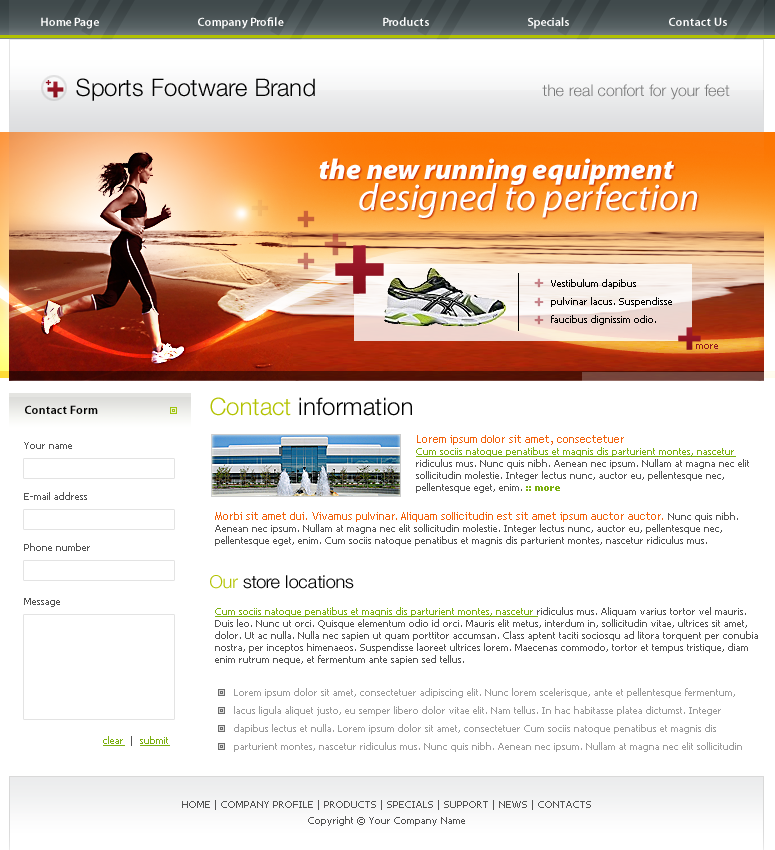
<style>
.page{position:relative;width:775px;height:850px;background:#ffffff}
.page>*{position:absolute;margin:0}
.t1{font:12px "MyriadPro-Semibold";color:#ffffff}
.t2{font:24px "HelveticaNeueLTPro-Lt";color:#000000}
.t3{font:16px "HelveticaNeueLTPro-Lt";color:#777778}
.t4{font:29px "MyriadPro-BlackIt";color:#ffffff}
.t5{font:38px "MyriadPro-It";color:#ffffff}
.t6{font:10px/18px "Tahoma";color:#000000}
.t7{font:10px "Tahoma";color:#911422}
.t8{font:24px "HelveticaNeueLTPro-Lt";color:#b2c200}
.t9{font:12px "MyriadPro-Semibold";color:#000000}
.t10{font:10px/12px "Tahoma";color:#535353}
.t11{font:11px/12px "TrebuchetMS";color:#f1610b}
.t12{font:10px/12px "Tahoma";color:#7baf10;text-decoration:underline}
.t13{font:10px/12px "Tahoma-Bold";color:#7baf10}
.t14{font:10px "Tahoma";color:#535353}
.t15{font:18px "HelveticaNeueLTPro-Lt";color:#000000}
.t16{font:18px "HelveticaNeueLTPro-Lt";color:#b2c200}
.t17{font:10px/18px "Tahoma";color:#9b9b9b}
.t18{font:10px "Tahoma";color:#7baf10;text-decoration:underline}
.t19{font:10px/16px "Tahoma";color:#535353}
</style>
<div class="page">
<p class="t1" style="left:41px;top:17px;width:58px;height:12px">Home Page</p>
<p class="t1" style="left:198px;top:17px;width:86px;height:12px">Company Profile</p>
<p class="t1" style="left:383px;top:17px;width:46px;height:9px">Products</p>
<p class="t1" style="left:528px;top:17px;width:41px;height:12px">Specials</p>
<p class="t1" style="left:669px;top:17px;width:58px;height:9px">Contact Us</p>
<p class="t2" style="left:76px;top:78px;width:239px;height:23px">Sports Footware Brand</p>
<p class="t3" style="left:542px;top:84px;width:188px;height:16px">the real confort for your feet</p>
<p class="t4" style="left:319px;top:158px;width:355px;height:27px">the new running equipment</p>
<p class="t5" style="left:359px;top:182px;width:339px;height:36px">designed to perfection</p>
<p class="t6" style="left:551px;top:279px;width:121px;height:46px">Vestibulum dapibus pulvinar lacus. Suspendisse faucibus dignissim odio.</p>
<p class="t7" style="left:696px;top:344px;width:22px;height:5px">more</p>
<p class="t2" style="left:210px;top:397px;width:202px;height:19px"><span class="t8">Contact </span>information</p>
<p class="t9" style="left:25px;top:405px;width:73px;height:9px">Contact Form</p>
<p class="t10" style="left:416px;top:435px;width:333px;height:58px"><span class="t11">Lorem ipsum dolor sit amet, consectetuer <br></span><span class="t12">Cum sociis natoque penatibus et magnis dis parturient montes, nascetur </span>ridiculus mus. Nunc quis nibh. Aenean nec ipsum. Nullam at magna nec elit sollicitudin molestie. Integer lectus nunc, auctor eu, pellentesque nec, pellentesque eget, enim. <span class="t13">:: more</span></p>
<p class="t14" style="left:24px;top:442px;width:48px;height:7px">Your name</p>
<p class="t14" style="left:24px;top:492px;width:63px;height:8px">E-mail address</p>
<p class="t10" style="left:215px;top:512px;width:523px;height:34px"><span class="t11">Morbi sit amet dui. Vivamus pulvinar. Aliquam sollicitudin est sit amet ipsum auctor auctor. </span>Nunc quis nibh. Aenean nec ipsum. Nullam at magna nec elit sollicitudin molestie. Integer lectus nunc, auctor eu, pellentesque nec, pellentesque eget, enim. Cum sociis natoque penatibus et magnis dis parturient montes, nascetur ridiculus mus.</p>
<p class="t14" style="left:24px;top:543px;width:66px;height:8px">Phone number</p>
<p class="t15" style="left:210px;top:575px;width:144px;height:14px"><span class="t16">Our </span>store locations</p>
<p class="t14" style="left:24px;top:598px;width:36px;height:9px">Message</p>
<p class="t10" style="left:215px;top:607px;width:543px;height:58px"><span class="t12">Cum sociis natoque penatibus et magnis dis parturient montes, nascetur </span>ridiculus mus. Aliquam varius tortor vel mauris. Duis leo. Nunc ut orci. Quisque elementum odio id orci. Mauris elit metus, interdum in, sollicitudin vitae, ultrices sit amet, dolor. Ut ac nulla. Nulla nec sapien ut quam porttitor accumsan. Class aptent taciti sociosqu ad litora torquent per conubia nostra, per inceptos himenaeos. Suspendisse laoreet ultrices lorem. Maecenas commodo, tortor et tempus tristique, diam enim rutrum neque, et fermentum ante sapien sed tellus.</p>
<p class="t17" style="left:234px;top:688px;width:508px;height:64px">Lorem ipsum dolor sit amet, consectetuer adipiscing elit. Nunc lorem scelerisque, ante et pellentesque fermentum, lacus ligula aliquet justo, eu semper libero dolor vitae elit. Nam tellus. In hac habitasse platea dictumst. Integer dapibus lectus et nulla. Lorem ipsum dolor sit amet, consectetuer Cum sociis natoque penatibus et magnis dis parturient montes, nascetur ridiculus mus. Nunc quis nibh. Aenean nec ipsum. Nullam at magna nec elit sollicitudin</p>
<p class="t18" style="left:103px;top:736px;width:67px;height:10px">clear<span class="t14">  |  </span>submit</p>
<p class="t19" style="left:182px;top:800px;width:409px;height:26px;text-align:center">HOME | COMPANY PROFILE | PRODUCTS | SPECIALS | SUPPORT | NEWS | CONTACTS<br>Copyright © Your Company Name</p>
</div>
